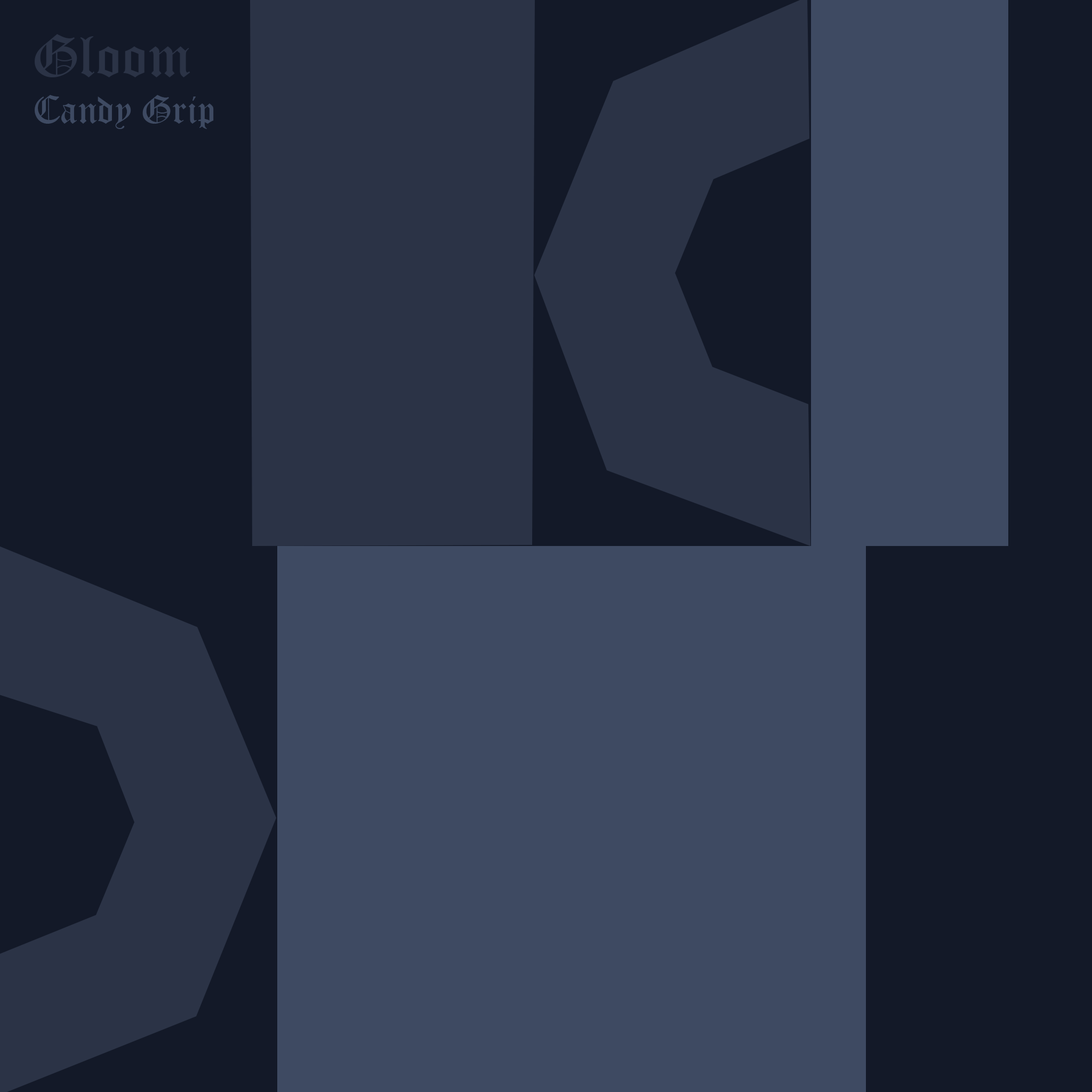
<style>
.page{position:relative;width:1092px;height:1092px;background:#131928}
.page>*{position:absolute;margin:0}
.t1{font:58.7px "OldEnglishTextMT";color:#2b3346}
.t2{font:38.4px "OldEnglishTextMT";color:#3e4a62}
</style>
<div class="page">
<p class="t1" style="left:35px;top:34px;width:155px;height:43px">Gloom</p>
<p class="t2" style="left:35px;top:95px;width:179px;height:34px">Candy Grip</p>
</div>
